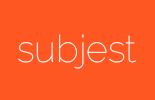
<style>
.page{position:relative;width:155px;height:100px;background:#ff5722}
.page>*{position:absolute;margin:0}
.t1{font:37.5px "Raleway-Thin";color:#ffffff}
</style>
<div class="page">
<p class="t1" style="left:18px;top:34px;width:118px;height:35px">subjest</p>
</div>
